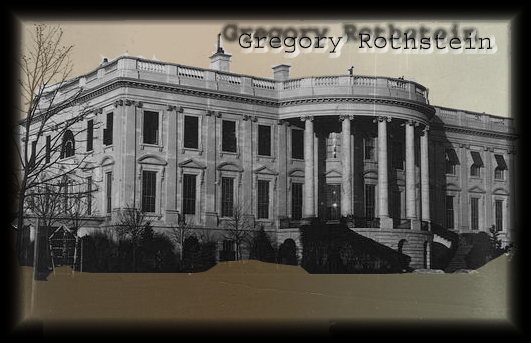
<style>
.page{position:relative;width:531px;height:343px}
.page>*{position:absolute;margin:0}
.t1{font:25px "Courier";color:#000000}
</style>
<div class="page">
<p class="t1" style="left:239px;top:32px;width:254px;height:21px">Gregory Rothstein</p>
</div>
